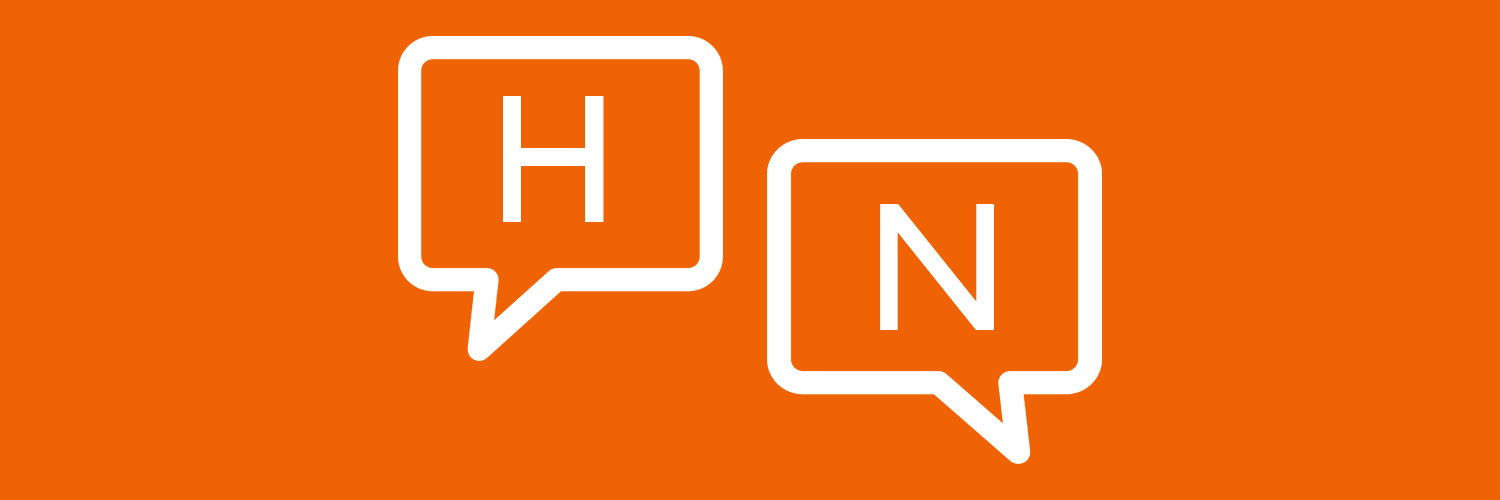
<style>
.page{position:relative;width:1500px;height:500px;background:#ef6305}
.page>*{position:absolute;margin:0}
.t1{font:180px "Railway";color:#ffffff}
</style>
<div class="page">
<p class="t1" style="left:503px;top:96px;width:101px;height:126px">H</p>
<p class="t1" style="left:503px;top:96px;width:101px;height:126px">H</p>
<p class="t1" style="left:880px;top:204px;width:114px;height:126px">N</p>
</div>
